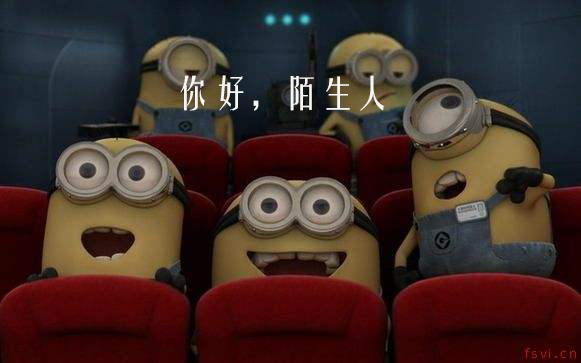
<style>
.page{position:relative;width:581px;height:363px}
.page>*{position:absolute;margin:0}
.t1{font:36px "FZYTK--GBK1-0";color:#f7f6f2}
</style>
<div class="page">
<p class="t1" style="left:180px;top:75px;width:204px;height:36px">你好，陌生人<br>zheshi</p>
</div>
